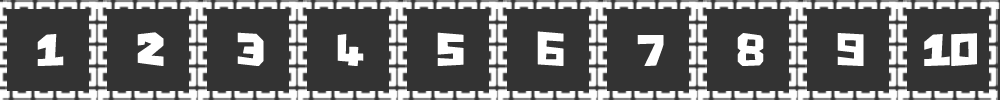
<style>
.page{position:relative;width:1000px;height:100px;background:#333333}
.page>*{position:absolute;margin:0}
.t1{font:48px "Chunq";color:#ffffff}
</style>
<div class="page">
<p class="t1" style="left:37px;top:34px;width:27px;height:32px">1</p>
<p class="t1" style="left:137px;top:32px;width:27px;height:34px">2</p>
<p class="t1" style="left:237px;top:32px;width:27px;height:34px">3</p>
<p class="t1" style="left:337px;top:34px;width:27px;height:32px">4</p>
<p class="t1" style="left:437px;top:32px;width:27px;height:34px">5</p>
<p class="t1" style="left:537px;top:31px;width:27px;height:35px">6</p>
<p class="t1" style="left:637px;top:35px;width:27px;height:31px">7</p>
<p class="t1" style="left:737px;top:33px;width:27px;height:33px">8</p>
<p class="t1" style="left:837px;top:33px;width:27px;height:33px">9</p>
<p class="t1" style="left:924px;top:33px;width:53px;height:33px">10</p>
</div>
